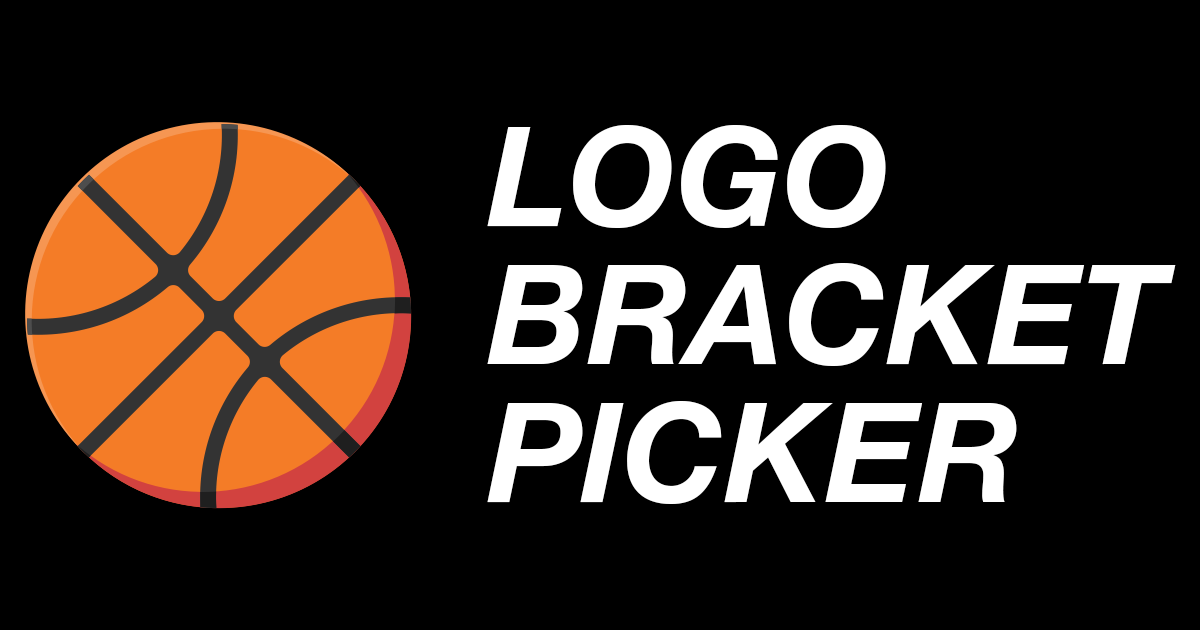
<style>
.page{position:relative;width:1200px;height:630px;background:#000000}
.page>*{position:absolute;margin:0}
.t1{font:139.3px/138.2px "HelveticaNeue-BoldItalic";color:#ffffff}
</style>
<div class="page">
<p class="t1" style="left:487px;top:125px;width:689px;height:379px">LOGO<br>BRACKET<br>PICKER</p>
</div>
